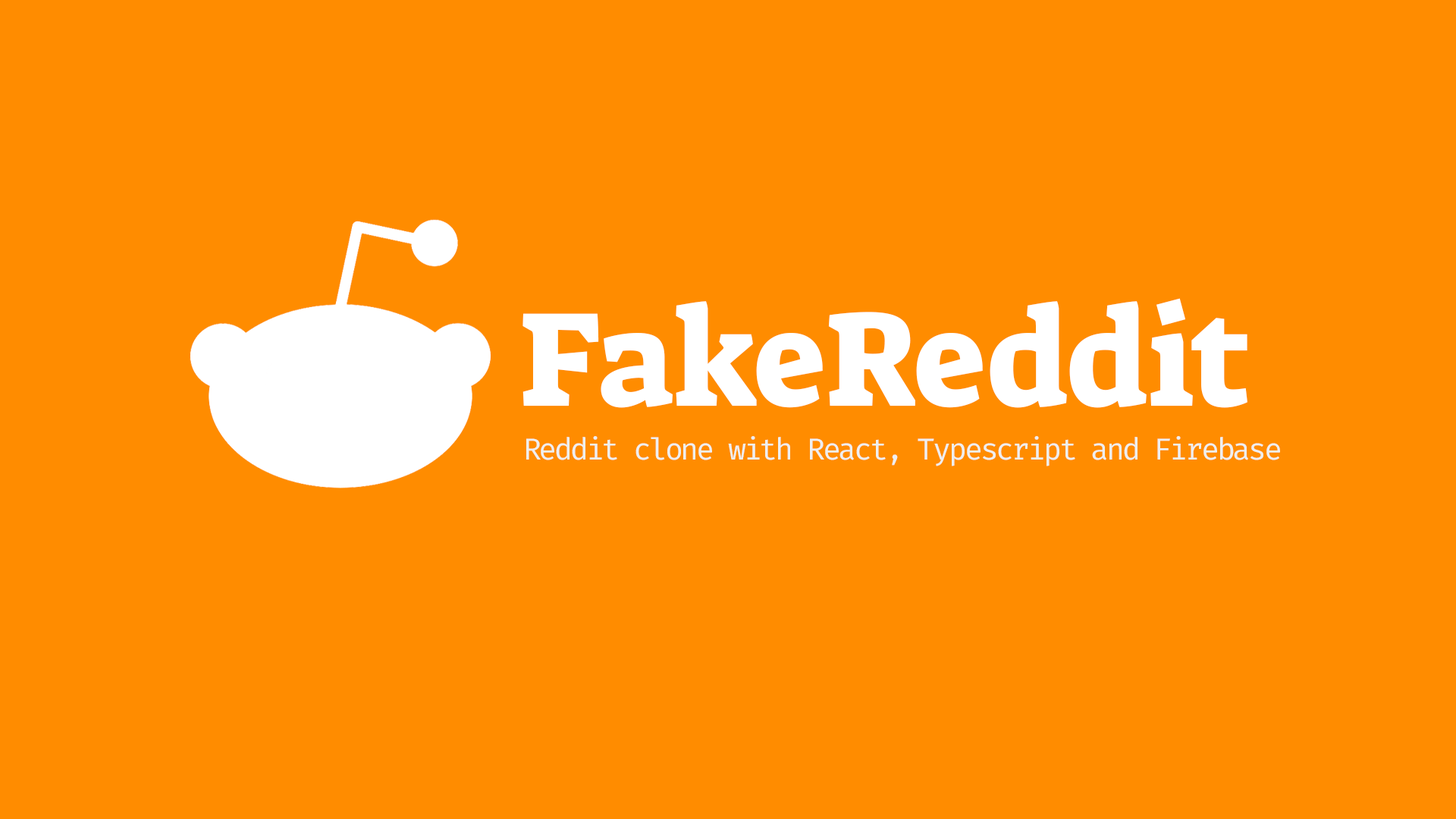
<style>
.page{position:relative;width:1456px;height:819px;background:#ff8c00}
.page>*{position:absolute;margin:0}
.t1{font:136.5px "SuezOne-Regular";letter-spacing:-0.01em;color:#ffffff}
.t2{font:30.3px "FiraCode-Regular";letter-spacing:-0.08em;color:#efefef}
</style>
<div class="page">
<p class="t1" style="left:522px;top:298px;width:725px;height:110px">FakeReddit</p>
<p class="t2" style="left:526px;top:436px;width:754px;height:30px">Reddit clone with React, Typescript and Firebase</p>
</div>
